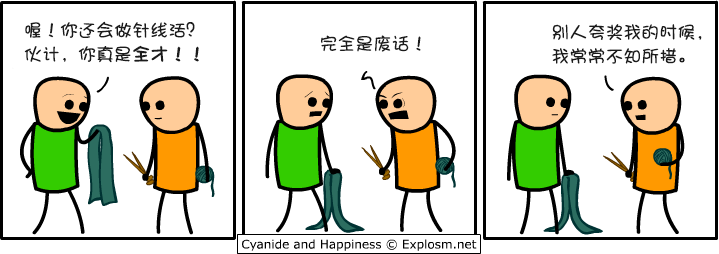
<style>
.page{position:relative;width:719px;height:254px;background:#ffffff}
.page>*{position:absolute;margin:0}
.t1{font:18px/24px "DFPShaoNvW5";color:#1b1b1b}
.t2{font:18px/24px "DFPShaoNvW5";color:#1b1b1b;font-weight:bold}
.t3{font:18px "DFPShaoNvW5";color:#1b1b1b}
</style>
<div class="page">
<p class="t1" style="left:24px;top:21px;width:175px;height:42px">喔！你还会做针线活？<br>伙计，你真是<span class="t2">全才！！</span></p>
<p class="t1" style="left:552px;top:24px;width:150px;height:40px">别人夸奖我的时候，<br>我常常不知所措。</p>
<p class="t3" style="left:321px;top:35px;width:100px;height:17px">完全是废话！</p>
</div>
